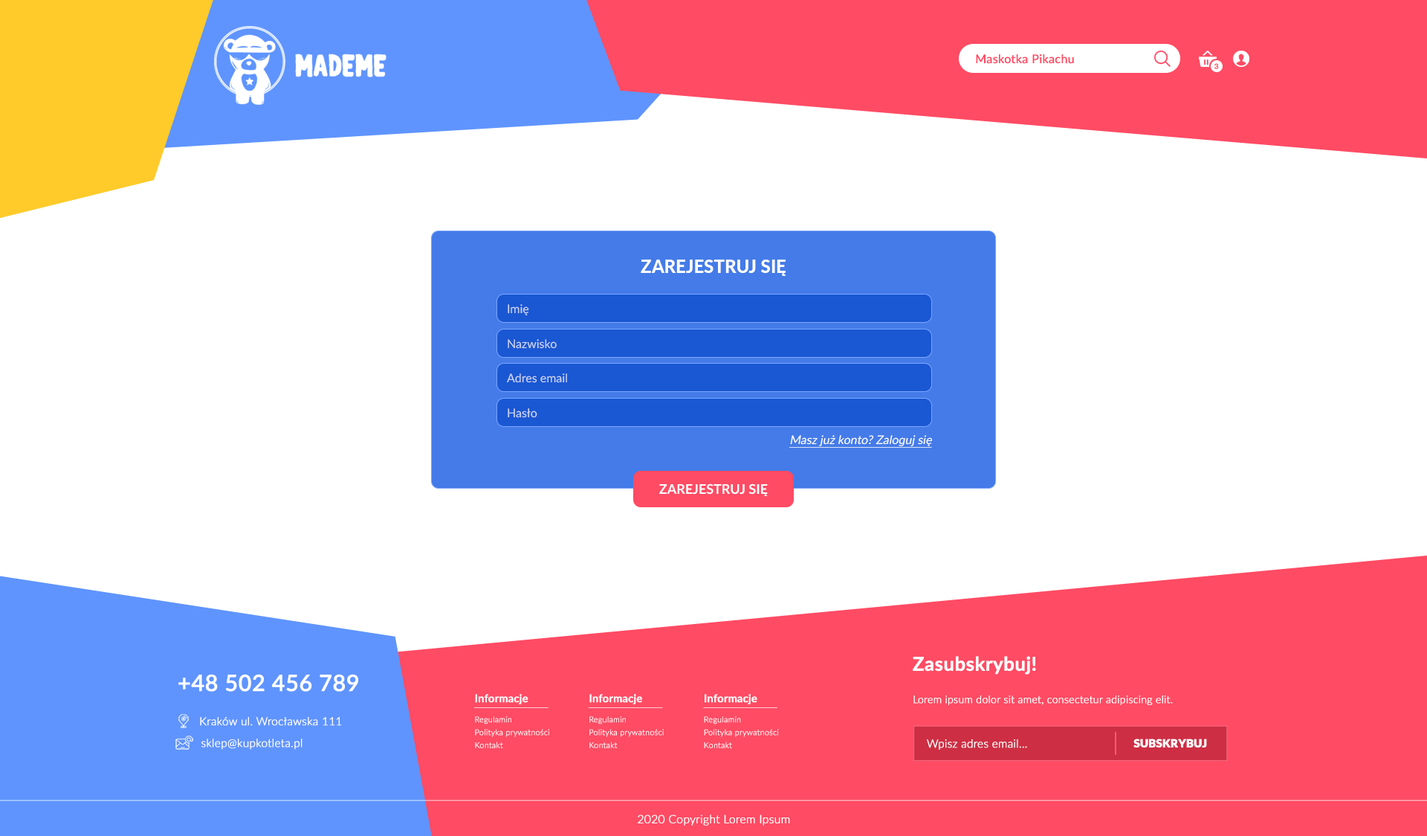
<style>
.page{position:relative;width:1427px;height:836px;background:#ffffff}
.page>*{position:absolute;margin:0}
.t1{font:11.9px "Lato-Regular";color:#ff4b64;font-weight:bold}
.t2{font:7.7px "GalanoGrotesqueAlt-Medium";color:#ff4b64;font-weight:bold}
.t3{font:17.8px "Lato-Heavy";color:#ffffff}
.t4{font:11.9px "Lato-Regular";color:#ced6f2}
.t5{font:11.9px "Lato-Regular";color:#ffffff;font-style:italic;text-decoration:underline}
.t6{font:13.4px "Lato-Bold";color:#ffffff}
.t7{font:19px "Lato-Bold";color:#ffffff;font-weight:bold}
.t8{font:22.5px "Lato-Semibold";color:#ffffff;font-weight:bold}
.t9{font:10.8px "Lato-Semibold";color:#ffffff;font-weight:bold}
.t10{font:10.4px "Lato-Light";color:#ffffff;font-weight:bold}
.t11{font:11.3px "Lato-Light";color:#ffffff;font-weight:bold}
.t12{font:8px "Lato-Light";color:#ffffff;font-weight:bold}
.t13{font:8px "Lato-Light";font-weight:bold}
.t14{font:11.1px "Lato-Black";color:#ffffff;font-weight:bold}
.t15{font:11.5px "Lato-Light";color:#ffffff;font-weight:bold}
</style>
<div class="page">
<p class="t1" style="left:976px;top:54px;width:98px;height:10px">Maskotka Pikachu</p>
<p class="t2" style="left:1215px;top:63px;width:4px;height:6px">3</p>
<p class="t3" style="left:641px;top:259px;width:145px;height:17px">ZAREJESTRUJ SIĘ</p>
<p class="t4" style="left:508px;top:304px;width:21px;height:11px">Imię</p>
<p class="t4" style="left:508px;top:339px;width:49px;height:10px">Nazwisko</p>
<p class="t4" style="left:507px;top:373px;width:60px;height:10px">Adres email</p>
<p class="t4" style="left:508px;top:408px;width:29px;height:10px">Hasło</p>
<p class="t5" style="left:789px;top:435px;width:144px;height:12px">Masz już konto? Zaloguj się</p>
<p class="t6" style="left:659px;top:483px;width:109px;height:13px">ZAREJESTRUJ SIĘ</p>
<p class="t7" style="left:913px;top:656px;width:123px;height:18px">Zasubskrybuj!</p>
<p class="t8" style="left:178px;top:673px;width:180px;height:18px">+48 502 456 789</p>
<p class="t9" style="left:475px;top:694px;width:54px;height:10px">Informacje</p>
<p class="t9" style="left:589px;top:694px;width:53px;height:10px">Informacje</p>
<p class="t9" style="left:705px;top:694px;width:52px;height:10px">Informacje</p>
<p class="t10" style="left:914px;top:695px;width:259px;height:10px">Lorem ipsum dolor sit amet, consectetur adipiscing elit.</p>
<p class="t11" style="left:200px;top:717px;width:142px;height:8px">Kraków ul. Wrocławska 111</p>
<p class="t12" style="left:475px;top:716px;width:36px;height:8px">Regulamin</p>
<p class="t12" style="left:589px;top:716px;width:37px;height:8px">Regulamin</p>
<p class="t12" style="left:704px;top:716px;width:37px;height:8px">Regulamin</p>
<p class="t12" style="left:475px;top:728px;width:74px;height:9px">Polityka prywatności</p>
<p class="t12" style="left:589px;top:728px;width:75px;height:9px">Polityka prywatności</p>
<p class="t12" style="left:704px;top:728px;width:75px;height:9px">Polityka prywatności</p>
<p class="t11" style="left:201px;top:738px;width:102px;height:11px">sklep@kupkotleta.pl</p>
<p class="t12" style="left:475px;top:741px;width:28px;height:7px">Kontakt</p>
<p class="t13" style="left:589px;top:741px;width:29px;height:7px">Kontakt</p>
<p class="t12" style="left:704px;top:741px;width:28px;height:7px">Kontakt</p>
<p class="t11" style="left:927px;top:739px;width:100px;height:10px">Wpisz adres email...</p>
<p class="t14" style="left:1134px;top:738px;width:73px;height:9px">SUBSKRYBUJ</p>
<p class="t15" style="left:638px;top:814px;width:152px;height:11px">2020 Copyright Lorem Ipsum</p>
</div>
